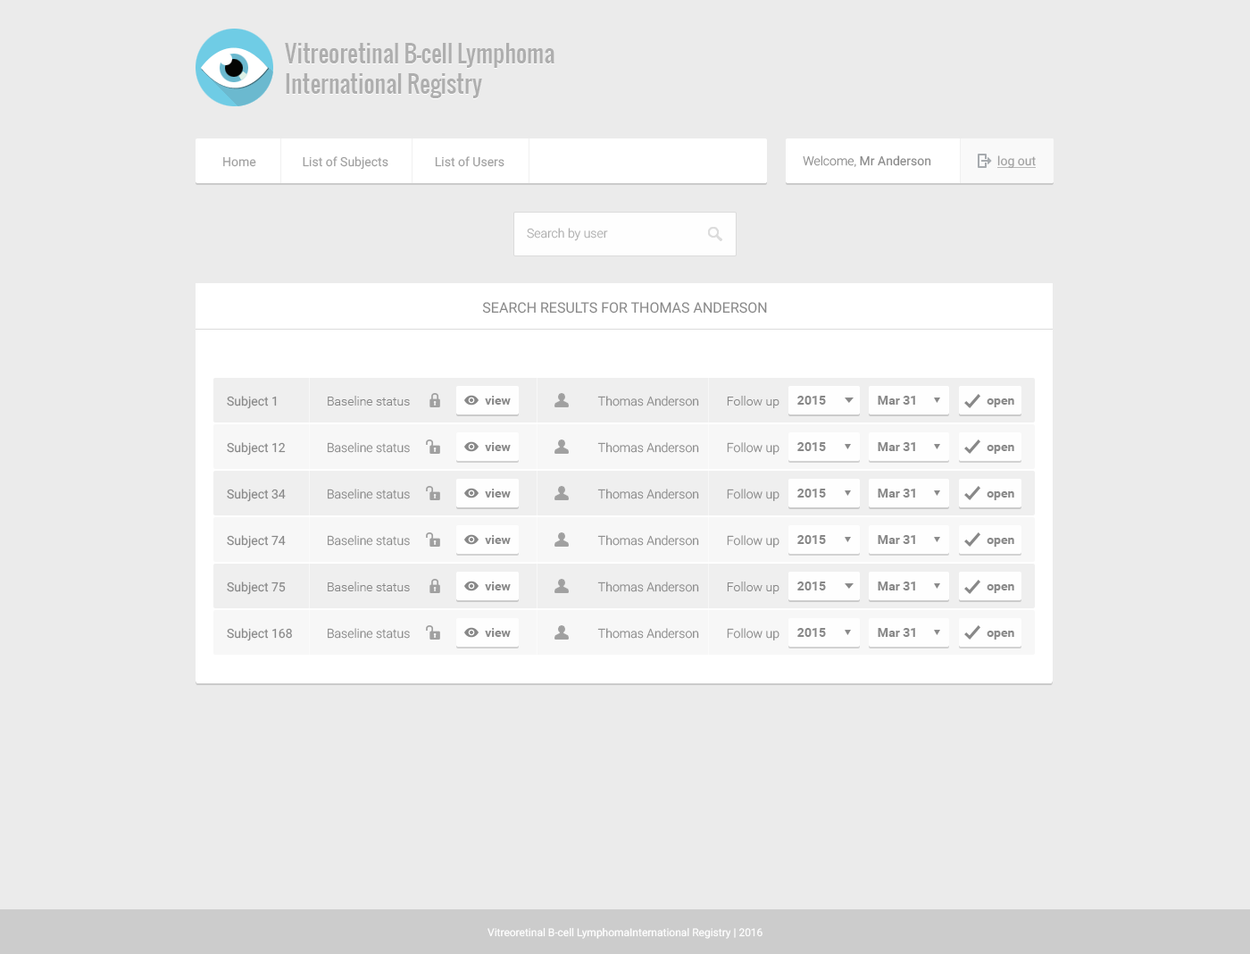
<style>
.page{position:relative;width:1250px;height:954px;background:#ebebeb}
.page>*{position:absolute;margin:0}
.t1{font:23.2px/30.4px "Oswald-Regular";color:#aeaeae}
.t2{font:12.5px "Roboto-Regular";color:#a0a0a0}
.t3{font:12.5px "Roboto-Regular";color:#888888}
.t4{font:12.5px "Roboto-Light";color:#888888}
.t5{font:12.5px "Roboto-Regular";color:#a0a0a0;text-decoration:underline}
.t6{font:12.5px "Roboto-Light";color:#aeaeae}
.t7{font:14.3px "Roboto-Regular";color:#888888;text-transform:uppercase}
.t8{font:12.5px "Roboto-Bold";color:#888888}
.t9{font:10.7px "Roboto-Regular";color:#ffffff}
</style>
<div class="page">
<p class="t1" style="left:285px;top:44px;width:270px;height:55px">Vitreoretinal B-cell Lymphoma<br>International Registry</p>
<p class="t1" style="left:285px;top:43px;width:270px;height:55px">Vitreoretinal B-cell Lymphoma<br>International Registry</p>
<p class="t2" style="left:223px;top:156px;width:282px;height:14px">Home               List of Subjects               List of Users</p>
<p class="t3" style="left:803px;top:155px;width:128px;height:12px"><span class="t4">Welcome, </span>Mr Anderson</p>
<p class="t5" style="left:998px;top:155px;width:38px;height:14px">log out</p>
<p class="t6" style="left:527px;top:228px;width:81px;height:13px">Search by user</p>
<p class="t7" style="left:482px;top:302px;width:285px;height:11px">SEARCH RESULTS FOR THOMAS ANDERSON</p>
<p class="t3" style="left:227px;top:396px;width:50px;height:13px">Subject 1</p>
<p class="t4" style="left:328px;top:396px;width:82px;height:9px">Baseline status</p>
<p class="t8" style="left:485px;top:396px;width:26px;height:9px">view</p>
<p class="t4" style="left:597px;top:396px;width:102px;height:10px">Thomas Anderson</p>
<p class="t4" style="left:727px;top:396px;width:53px;height:12px">Follow up</p>
<p class="t8" style="left:797px;top:396px;width:29px;height:9px">2015</p>
<p class="t8" style="left:878px;top:396px;width:37px;height:9px">Mar 31</p>
<p class="t8" style="left:987px;top:398px;width:27px;height:9px">open</p>
<p class="t3" style="left:227px;top:442px;width:59px;height:13px">Subject 12</p>
<p class="t4" style="left:328px;top:442px;width:82px;height:11px">Baseline status</p>
<p class="t8" style="left:485px;top:442px;width:26px;height:9px">view</p>
<p class="t4" style="left:597px;top:442px;width:102px;height:11px">Thomas Anderson</p>
<p class="t4" style="left:727px;top:442px;width:53px;height:13px">Follow up</p>
<p class="t8" style="left:797px;top:442px;width:29px;height:9px">2015</p>
<p class="t8" style="left:878px;top:442px;width:37px;height:9px">Mar 31</p>
<p class="t8" style="left:987px;top:445px;width:27px;height:9px">open</p>
<p class="t3" style="left:227px;top:488px;width:59px;height:14px">Subject 34</p>
<p class="t4" style="left:328px;top:488px;width:82px;height:11px">Baseline status</p>
<p class="t8" style="left:485px;top:488px;width:26px;height:9px">view</p>
<p class="t4" style="left:597px;top:488px;width:102px;height:11px">Thomas Anderson</p>
<p class="t4" style="left:727px;top:488px;width:53px;height:13px">Follow up</p>
<p class="t8" style="left:797px;top:488px;width:29px;height:9px">2015</p>
<p class="t8" style="left:878px;top:488px;width:37px;height:9px">Mar 31</p>
<p class="t8" style="left:987px;top:491px;width:27px;height:9px">open</p>
<p class="t3" style="left:227px;top:535px;width:59px;height:13px">Subject 74</p>
<p class="t4" style="left:328px;top:535px;width:82px;height:11px">Baseline status</p>
<p class="t8" style="left:485px;top:535px;width:26px;height:9px">view</p>
<p class="t4" style="left:597px;top:535px;width:102px;height:11px">Thomas Anderson</p>
<p class="t4" style="left:727px;top:535px;width:53px;height:12px">Follow up</p>
<p class="t8" style="left:797px;top:535px;width:29px;height:9px">2015</p>
<p class="t8" style="left:878px;top:535px;width:37px;height:9px">Mar 31</p>
<p class="t8" style="left:987px;top:538px;width:27px;height:9px">open</p>
<p class="t3" style="left:227px;top:581px;width:59px;height:14px">Subject 75</p>
<p class="t4" style="left:328px;top:581px;width:82px;height:10px">Baseline status</p>
<p class="t8" style="left:485px;top:581px;width:26px;height:9px">view</p>
<p class="t4" style="left:597px;top:581px;width:102px;height:11px">Thomas Anderson</p>
<p class="t4" style="left:727px;top:581px;width:53px;height:13px">Follow up</p>
<p class="t8" style="left:797px;top:581px;width:29px;height:9px">2015</p>
<p class="t8" style="left:878px;top:581px;width:37px;height:9px">Mar 31</p>
<p class="t8" style="left:987px;top:584px;width:27px;height:9px">open</p>
<p class="t3" style="left:227px;top:628px;width:65px;height:13px">Subject 168</p>
<p class="t4" style="left:328px;top:628px;width:82px;height:11px">Baseline status</p>
<p class="t8" style="left:485px;top:628px;width:26px;height:9px">view</p>
<p class="t4" style="left:597px;top:628px;width:102px;height:11px">Thomas Anderson</p>
<p class="t4" style="left:727px;top:628px;width:53px;height:12px">Follow up</p>
<p class="t8" style="left:797px;top:628px;width:29px;height:9px">2015</p>
<p class="t8" style="left:878px;top:628px;width:37px;height:9px">Mar 31</p>
<p class="t8" style="left:987px;top:630px;width:27px;height:9px">open</p>
<p class="t9" style="left:488px;top:927px;width:275px;height:12px">Vitreoretinal B-cell LymphomaInternational Registry | 2016</p>
</div>
